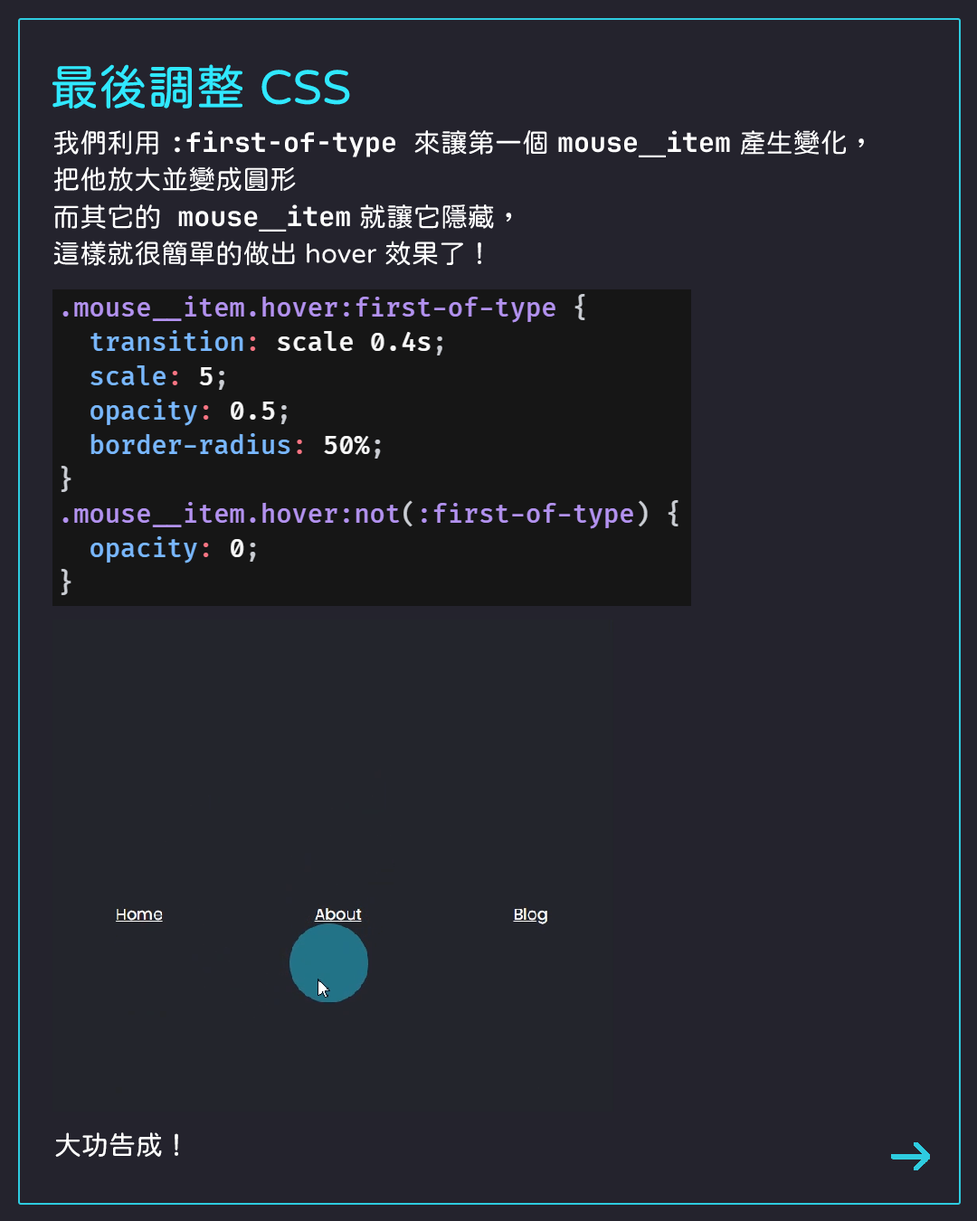
<style>
.page{position:relative;width:977px;height:1221px;background:#24232d}
.page>*{position:absolute;margin:0}
.t1{font:48.8px "jf-openhuninn-1.1";color:#30e8ff}
.t2{font:27.1px/37.1px "jf-openhuninn-1.1";color:#ffffff}
.t3{font:27.1px/37.1px "JetBrainsMono-Bold";color:#ffffff}
.t4{font:27.1px/37.1px "DFKaiShu-SB-Estd-BF";color:#ffffff}
.t5{font:27.1px "jf-openhuninn-1.1";color:#ffffff}
</style>
<div class="page">
<p class="t1" style="left:52px;top:64px;width:298px;height:45px">最後調整 CSS</p>
<p class="t2" style="left:53px;top:130px;width:811px;height:136px">我們利用 <span class="t3">:first-of-type </span>來讓第一個 <span class="t3">mouse</span><span class="t4">ˍ</span><span class="t3">item</span> 產生變化，<br>把他放大並變成圓形<br>而其它的<span class="t3"> mouse</span><span class="t4">ˍ</span><span class="t3">item</span> 就讓它隱藏，<br>這樣就很簡單的做出 hover 效果了！</p>
<p class="t5" style="left:55px;top:1132px;width:123px;height:25px">大功告成！</p>
</div>
